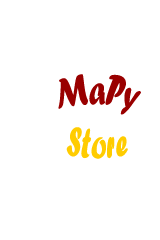
<style>
.page{position:relative;width:160px;height:240px;background:#ffffff}
.page>*{position:absolute;margin:0}
.t1{font:36px "ForteMT";color:#ffcc00}
.t2{font:36px "ForteMT";color:#990000}
</style>
<div class="page">
<p class="t1" style="left:58px;top:74px;width:83px;height:85px;text-align:center"><span class="t2">MaPy<br></span>Store</p>
</div>
